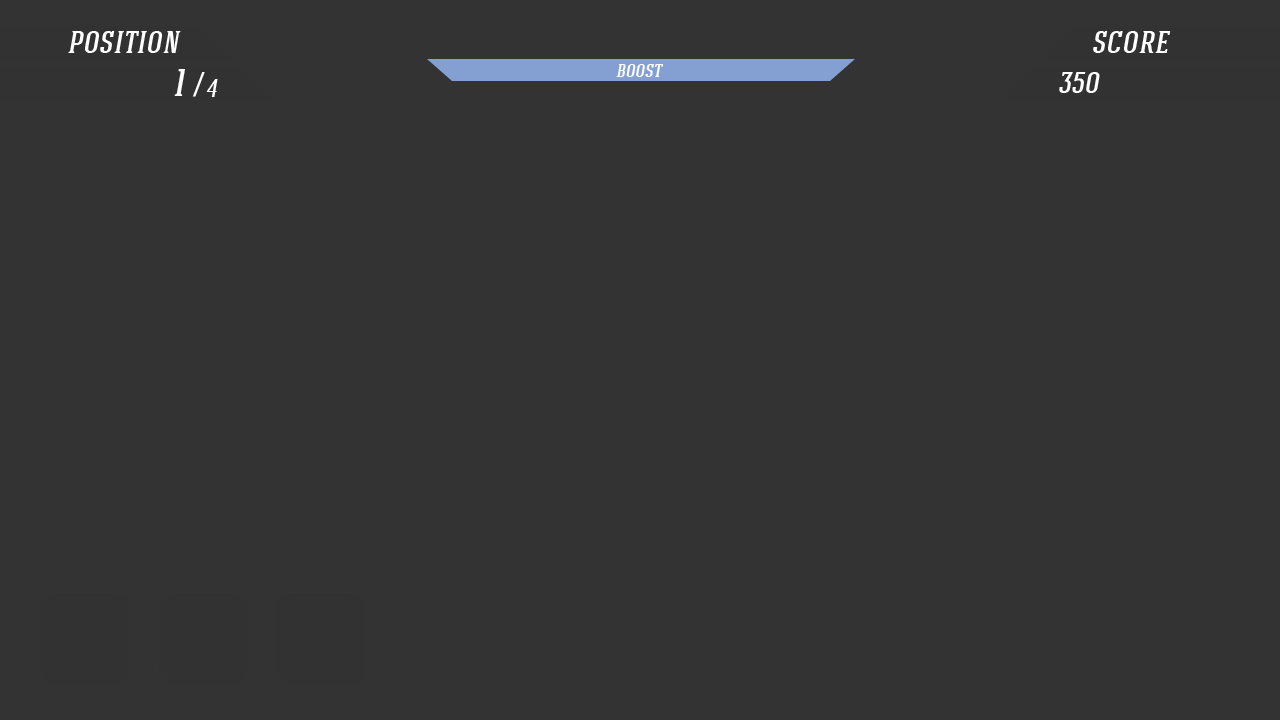
<style>
.page{position:relative;width:1280px;height:720px;background:#333333}
.page>*{position:absolute;margin:0}
.t1{font:34px "HaginCapsMedium";color:#ffffff;font-style:italic}
.t2{font:20px "HaginCapsMedium";color:#ffffff;font-style:italic}
.t3{font:38px "HaginCapsMedium";color:#ffffff;font-style:italic}
.t4{font:30px "HaginCapsMedium";color:#ffffff;font-style:italic}
.t5{font:25px "HaginCapsMedium";color:#ffffff;font-style:italic}
</style>
<div class="page">
<p class="t1" style="left:68px;top:31px;width:113px;height:22px">position</p>
<p class="t1" style="left:1093px;top:31px;width:78px;height:22px">score</p>
<p class="t2" style="left:616px;top:64px;width:47px;height:13px">boost</p>
<p class="t3" style="left:174px;top:69px;width:11px;height:27px">1</p>
<p class="t1" style="left:192px;top:72px;width:13px;height:25px">/</p>
<p class="t4" style="left:1059px;top:72px;width:41px;height:21px">350</p>
<p class="t5" style="left:206px;top:79px;width:12px;height:18px"><span class="t1"> </span>4</p>
</div>
